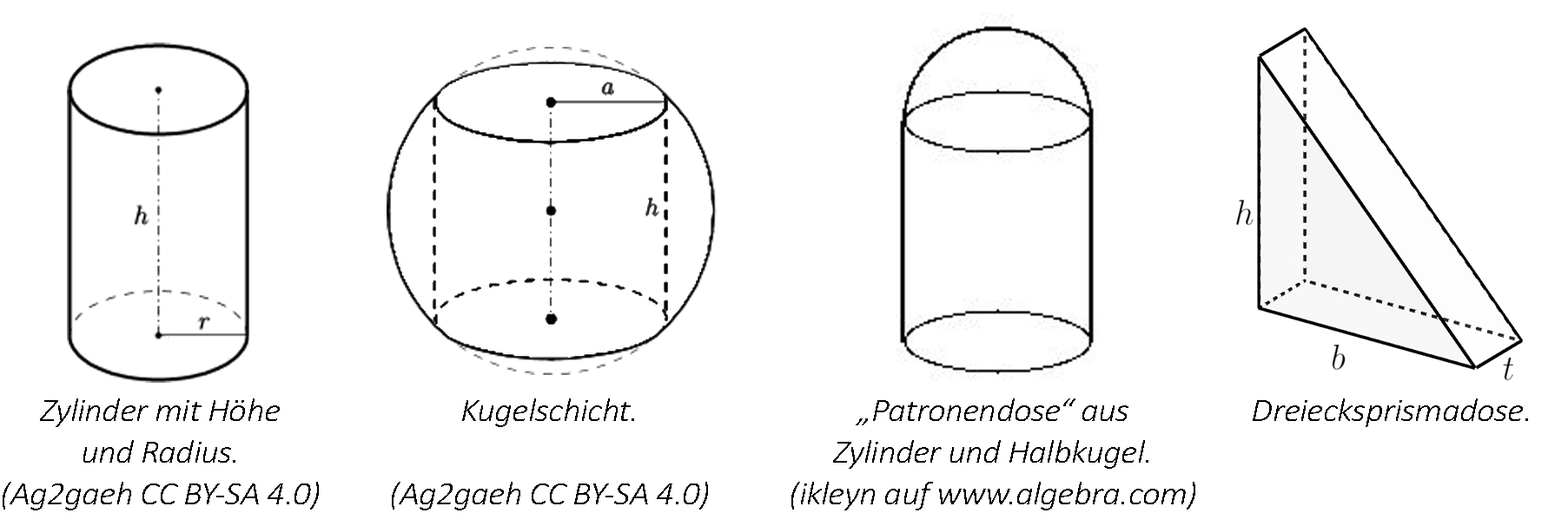
<style>
.page{position:relative;width:1568px;height:513px;background:#ffffff}
.page>*{position:absolute;margin:0}
.t1{font:32.6px/41.6px "Calibri-LightItalic";letter-spacing:-0.02em;color:#000000;scale:1.1 1}
.t2{font:32.6px "Calibri-LightItalic";letter-spacing:-0.02em;color:#000000;scale:1.1 1}
</style>
<div class="page">
<p class="t1" style="left:3px;top:399px;width:316px;height:112px;text-align:center">Zylinder mit Höhe<br>und Radius.<br>(Ag2gaeh CC BY-SA 4.0)</p>
<p class="t1" style="left:392px;top:399px;width:316px;height:112px;text-align:center">Kugelschicht.<br><br>(Ag2gaeh CC BY-SA 4.0)</p>
<p class="t1" style="left:791px;top:399px;width:404px;height:112px;text-align:center">„Patronendose“ aus<br>Zylinder und Halbkugel.<br>(ikleyn auf www.algebra.com)</p>
<p class="t2" style="left:1253px;top:399px;width:275px;height:28px">Dreiecksprismadose.</p>
</div>
